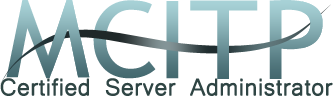
<style>
.page{position:relative;width:333px;height:96px;background:#ffffff}
.page>*{position:absolute;margin:0}
.t1{font:107.9px "TrebuchetMS";scale:1.1 1}
.t2{font:105.2px "TrebuchetMS";scale:1.13 1}
.t3{font:109.6px "TrebuchetMS";scale:1.08 1}
.t4{font:109.2px "TrebuchetMS";scale:1.08 1}
.t5{font:30px "Microsoft-Yi-Baiti";color:#2f4544;font-weight:bold}
</style>
<div class="page">
<p class="t1" style="left:6px;top:0px;width:84px;height:79px">M</p>
<p class="t2" style="left:93px;top:0px;width:63px;height:79px">C</p>
<p class="t1" style="left:166px;top:1px;width:13px;height:78px">I</p>
<p class="t3" style="left:190px;top:0px;width:68px;height:79px">T</p>
<p class="t4" style="left:269px;top:0px;width:54px;height:79px">P</p>
<p class="t5" style="left:0px;top:78px;width:333px;height:18px">Certified Server Administrator</p>
</div>
